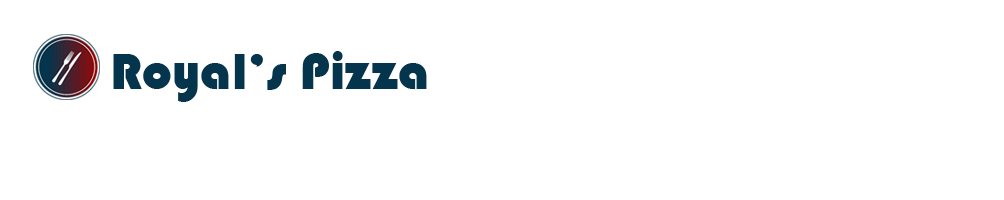
<style>
.page{position:relative;width:1004px;height:200px;background:#ffffff}
.page>*{position:absolute;margin:0}
.t1{font:53.3px "Bauhaus93";color:#04354c}
</style>
<div class="page">
<p class="t1" style="left:113px;top:51px;width:314px;height:51px">Royal’s Pizza</p>
</div>
